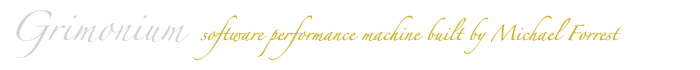
<style>
.page{position:relative;width:700px;height:70px;background:#ffffff}
.page>*{position:absolute;margin:0}
.t1{font:26.9px "Zapfino";color:#d2d2d2}
.t2{font:13.1px "Zapfino";color:#d2b322}
</style>
<div class="page">
<p class="t1" style="left:16px;top:10px;width:174px;height:48px">Grimonium</p>
<p class="t2" style="left:193px;top:15px;width:428px;height:45px">software performance machine built by Michael Forrest</p>
</div>
